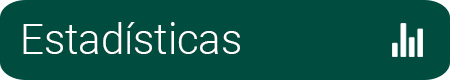
<style>
.page{position:relative;width:450px;height:80px;background:#004d40}
.page>*{position:absolute;margin:0}
.t1{font:41.7px "Roboto-Light";color:#ffffff}
</style>
<div class="page">
<p class="t1" style="left:23px;top:22px;width:217px;height:32px">Estadísticas</p>
</div>
